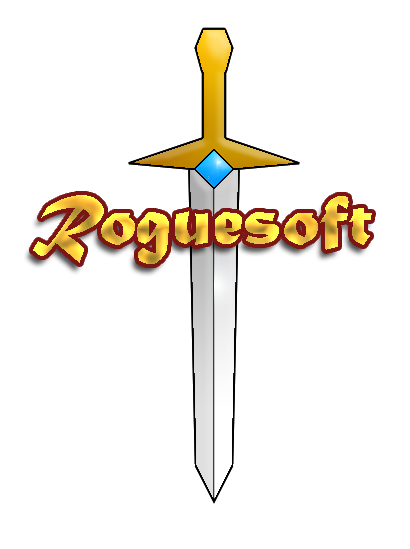
<style>
.page{position:relative;width:410px;height:549px;background:#ffffff}
.page>*{position:absolute;margin:0}
.t1{font:75px "MaturaMTScriptCapitals"}
</style>
<div class="page">
<p class="t1" style="left:33px;top:195px;width:339px;height:69px">Roguesoft</p>
</div>
